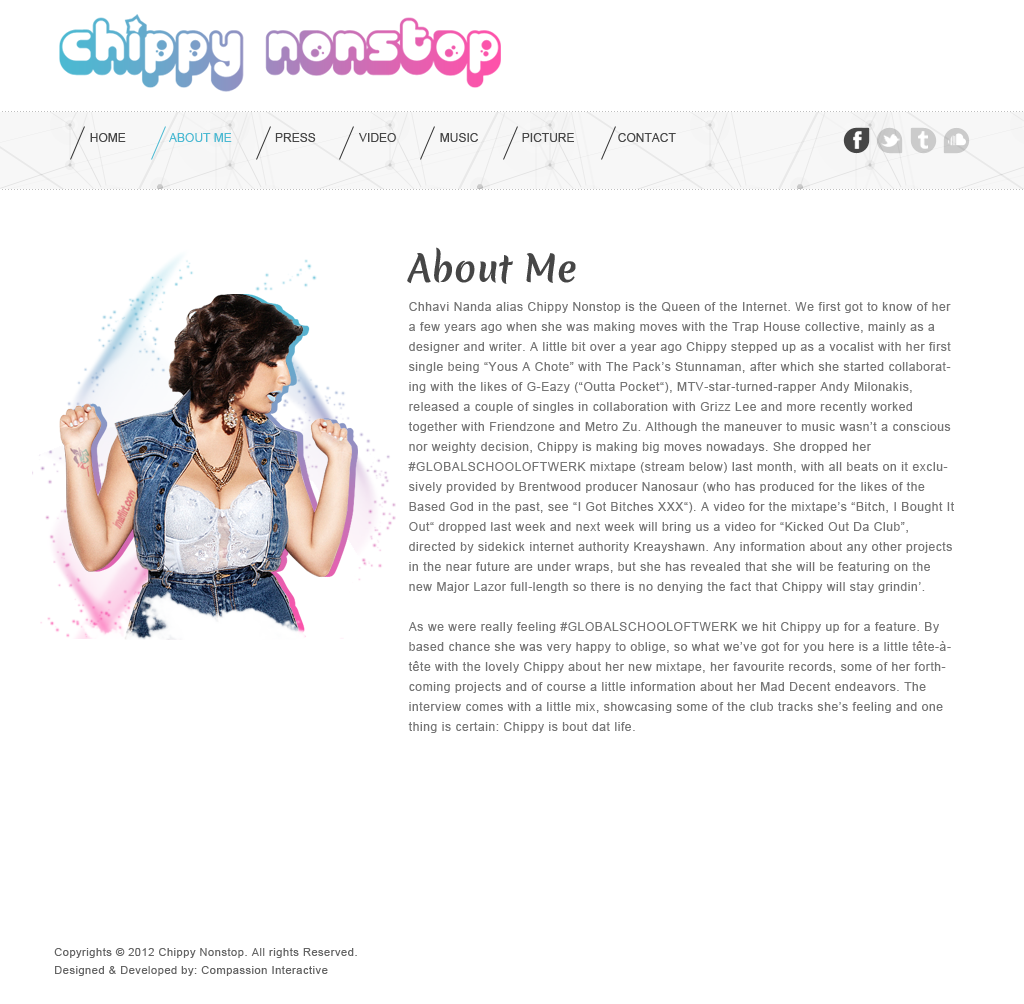
<style>
.page{position:relative;width:1024px;height:1004px;background:#ffffff}
.page>*{position:absolute;margin:0}
.t1{font:12px "ArialMT";color:#464646}
.t2{font:12px "ArialMT";color:#4bb9d2}
.t3{font:36px "MeriendaOne-Regular";color:#464646}
.t4{font:12px/20px "ArialMT";letter-spacing:0.05em;color:#767676}
.t5{font:11px/18px "ArialMT";letter-spacing:0.05em;color:#656565}
</style>
<div class="page">
<p class="t1" style="left:90px;top:133px;width:586px;height:9px">HOME             <span class="t2">ABOUT ME             </span>PRESS             VIDEO             MUSIC             PICTURE             CONTACT</p>
<p class="t3" style="left:407px;top:247px;width:169px;height:37px">About Me</p>
<p class="t4" style="left:408px;top:302px;width:546px;height:431px">Chhavi Nanda alias Chippy Nonstop is the Queen of the Internet. We first got to know of her a few years ago when she was making moves with the Trap House collective, mainly as a designer and writer. A little bit over a year ago Chippy stepped up as a vocalist with her first single being “Yous A Chote” with The Pack’s Stunnaman, after which she started collaborating with the likes of G-Eazy (“Outta Pocket“), MTV-star-turned-rapper Andy Milonakis, released a couple of singles in collaboration with Grizz Lee and more recently worked together with Friendzone and Metro Zu. Although the maneuver to music wasn’t a conscious nor weighty decision, Chippy is making big moves nowadays. She dropped her #GLOBALSCHOOLOFTWERK mixtape (stream below) last month, with all beats on it exclusively provided by Brentwood producer Nanosaur (who has produced for the likes of the Based God in the past, see “I Got Bitches XXX“). A video for the mixtape’s “Bitch, I Bought It Out“ dropped last week and next week will bring us a video for “Kicked Out Da Club”, directed by sidekick internet authority Kreayshawn. Any information about any other projects in the near future are under wraps, but she has revealed that she will be featuring on the new Major Lazor full-length so there is no denying the fact that Chippy will stay grindin’.<br><br>As we were really feeling #GLOBALSCHOOLOFTWERK we hit Chippy up for a feature. By based chance she was very happy to oblige, so what we’ve got for you here is a little tête-à-tête with the lovely Chippy about her new mixtape, her favourite records, some of her forthcoming projects and of course a little information about her Mad Decent endeavors. The interview comes with a little mix, showcasing some of the club tracks she’s feeling and one thing is certain: Chippy is bout dat life.</p>
<p class="t5" style="left:54px;top:948px;width:303px;height:28px">Copyrights © 2012 Chippy Nonstop. All rights Reserved.<br>Designed &amp; Developed by: Compassion Interactive</p>
</div>
